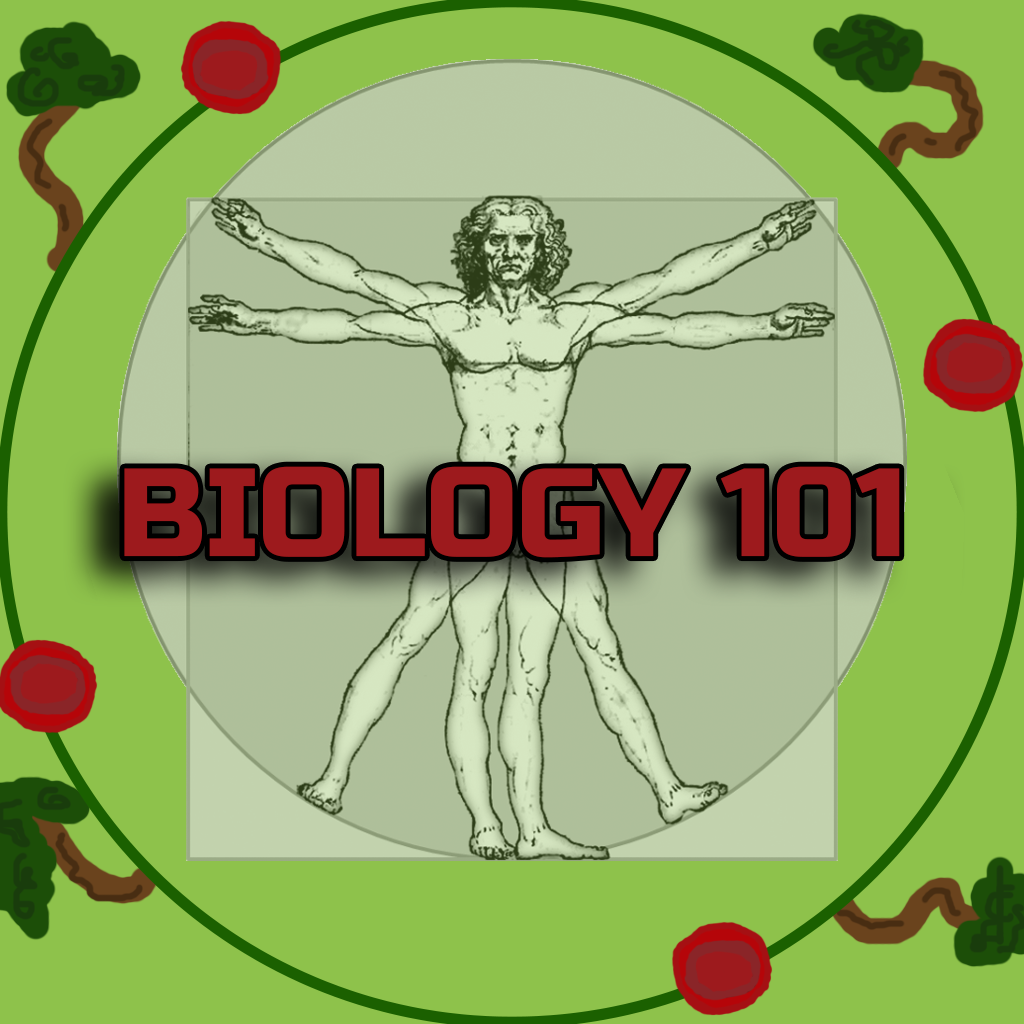
<style>
.page{position:relative;width:1024px;height:1024px;background:#8ec24b}
.page>*{position:absolute;margin:0}
.t1{font:125px "RussoOne-Regular";color:#9d1a1d}
</style>
<div class="page">
<p class="t1" style="left:124px;top:466px;width:776px;height:92px">BIOLOGY 101</p>
</div>
